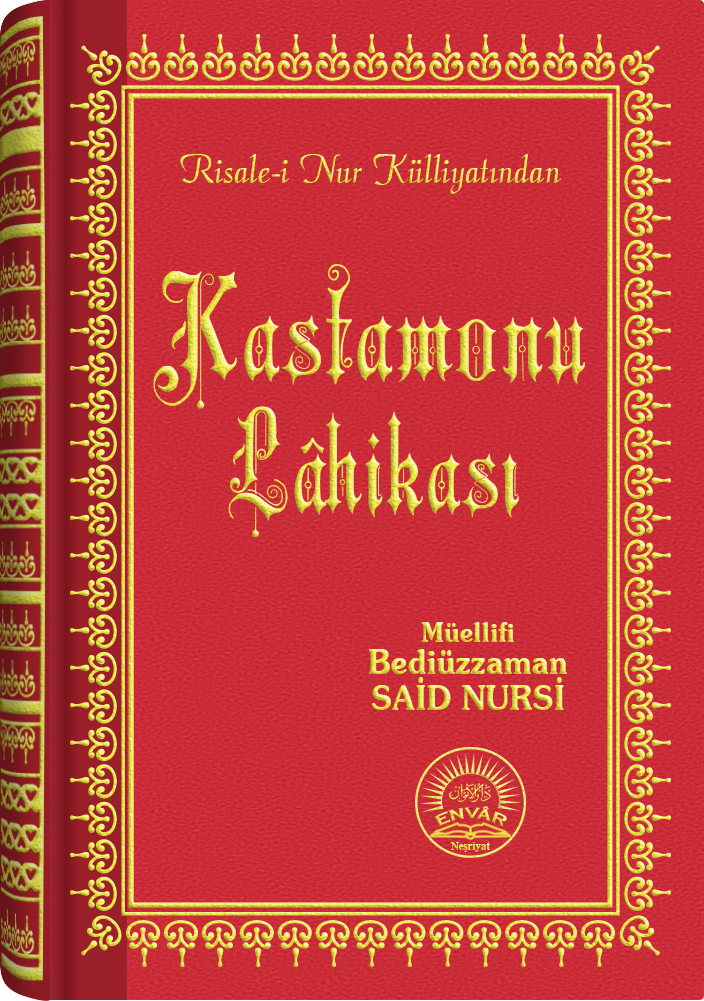
<style>
.page{position:relative;width:704px;height:1001px}
.page>*{position:absolute;margin:0}
.t1{font:45.3px "Barla © 072 Aria ScriptScriptSSi";scale:0.94 1}
.t2{font:147.4px "Barla © 001 Liva Nur";letter-spacing:-0.001em;scale:0.92 1}
.t3{font:135.4px "Barla © 001 Liva Nur";letter-spacing:-0.001em;scale:0.92 1}
.t4{font:33.4px/32.4px "SouvenirITCbyBT-Demi";scale:0.93 1}
.t5{font:27.4px/24.4px "SouvenirITCbyBT-Demi";scale:0.93 1}
.t6{font:33.4px/36.4px "SouvenirITCbyBT-Demi";scale:0.93 1}
.t7{font:15.6px "CopperplateGothic-Bold"}
.t8{font:11.2px "Times-Bold";scale:0.96 1}
</style>
<div class="page">
<p class="t1" style="left:180px;top:154px;width:381px;height:40px">Risale-i Nur Külliyatından</p>
<p class="t2" style="left:153px;top:264px;width:432px;height:145px">Kastamonu</p>
<p class="t3" style="left:228px;top:406px;width:291px;height:132px">Lâhikası</p>
<p class="t4" style="left:369px;top:622px;width:198px;height:88px;text-align:center"><span class="t5">Müellifi<br></span>Bediüzzaman<br><span class="t6">SAİD NURSİ</span></p>
<p class="t7" style="left:434px;top:806px;width:73px;height:21px">ENVÂR</p>
<p class="t8" style="left:451px;top:842px;width:39px;height:10px">Neşriyat</p>
</div>
